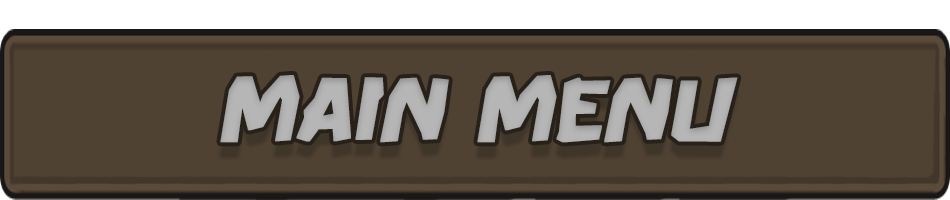
<style>
.page{position:relative;width:950px;height:200px;background:#4f4233}
.page>*{position:absolute;margin:0}
.t1{font:91.7px "Boulder";letter-spacing:-0.025em;color:#b6b6b6;font-weight:bold;font-style:italic}
</style>
<div class="page">
<p class="t1" style="left:220px;top:75px;width:518px;height:68px">main menu</p>
</div>
